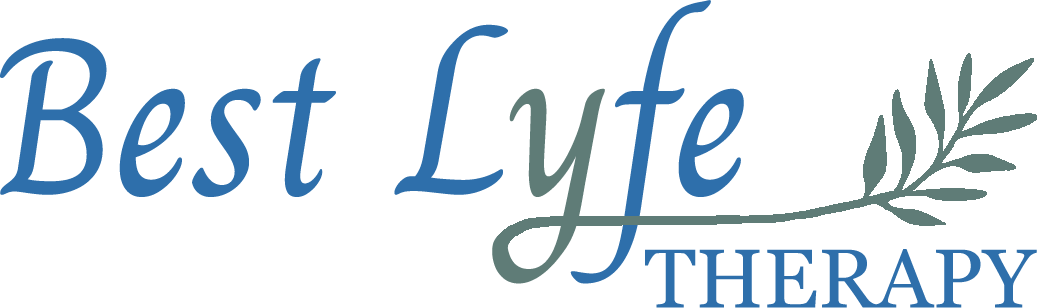
<style>
.page{position:relative;width:1037px;height:308px;background:#ffffff}
.page>*{position:absolute;margin:0}
.t1{font:222.2px "Charm-Regular";color:#2e6fab}
.t2{font:222.2px "Charm-Regular";color:#5f7c77}
.t3{font:83.3px "Georgia";color:#2e6fab}
</style>
<div class="page">
<p class="t1" style="left:0px;top:0px;width:744px;height:284px">Best L<span class="t2">y</span>fe</p>
<p class="t3" style="left:645px;top:249px;width:392px;height:59px">THERAPY</p>
</div>
